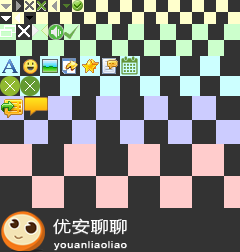
<style>
.page{position:relative;width:240px;height:252px;background:#333333}
.page>*{position:absolute;margin:0}
.t1{font:16px "MicrosoftYaHei";letter-spacing:0.05em;color:#ffffff;scale:1.12 1}
.t2{font:10.1px "ArialMT";letter-spacing:0.05em;color:#ffffff;scale:1.12 1}
</style>
<div class="page">
<p class="t1" style="left:53px;top:218px;width:74px;height:16px">优安聊聊</p>
<p class="t2" style="left:54px;top:241px;width:73px;height:9px">youanliaoliao</p>
</div>
